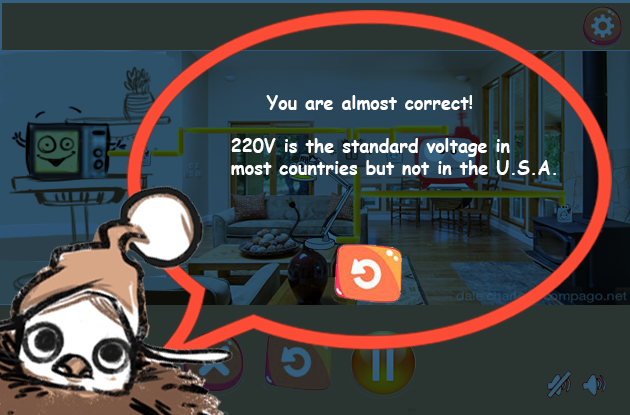
<style>
.page{position:relative;width:630px;height:415px;background:#2a3532}
.page>*{position:absolute;margin:0}
.t1{font:18px "ComicSansMS-Bold";color:#ffffff}
</style>
<div class="page">
<p class="t1" style="left:231px;top:95px;width:325px;height:80px">You are almost correct!<br><br>220V is the standard voltage in<br>most countries but not in the U.S.A.</p>
</div>
